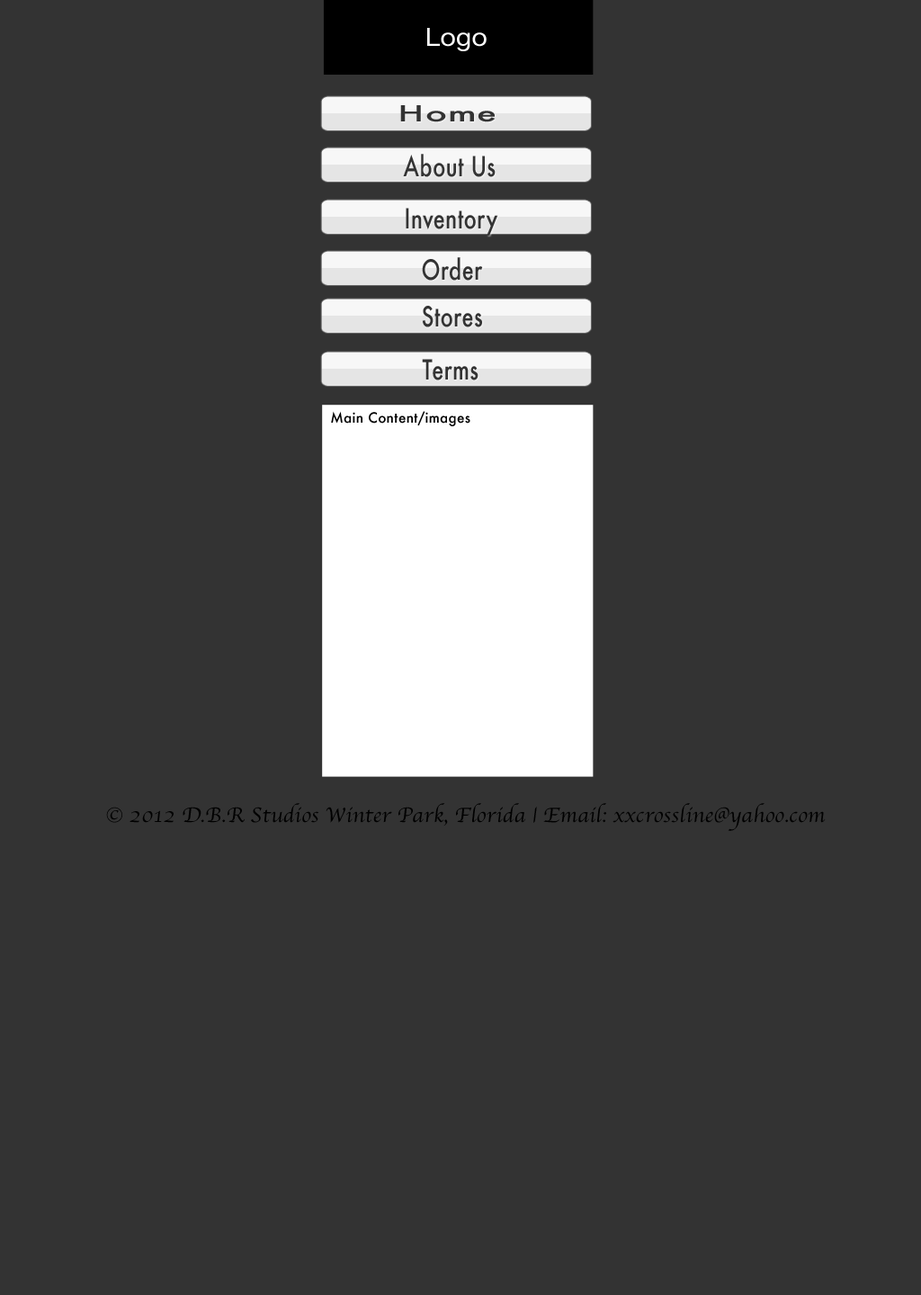
<style>
.page{position:relative;width:921px;height:1295px;background:#333333}
.page>*{position:absolute;margin:0}
.t1{font:25.2px "HelveticaNeue";letter-spacing:0.01em;color:#ffffff;scale:1.07 1}
.t2{font:21.6px "Futura-Medium";letter-spacing:0.02em;color:#333333;scale:1.67 1}
.t3{font:27px "Futura-Medium";letter-spacing:0.02em;color:#333333;scale:0.78 1}
.t4{font:13.6px "Futura-Medium";letter-spacing:0.02em;color:#000000}
.t5{font:21.6px "Apple-Chancery";letter-spacing:0.01em;color:#000000}
</style>
<div class="page">
<p class="t1" style="left:427px;top:28px;width:60px;height:23px">Logo</p>
<p class="t2" style="left:400px;top:105px;width:95px;height:17px">Home</p>
<p class="t3" style="left:403px;top:154px;width:92px;height:23px">About Us</p>
<p class="t3" style="left:406px;top:208px;width:92px;height:28px">Inventory</p>
<p class="t3" style="left:422px;top:257px;width:61px;height:24px">Order</p>
<p class="t3" style="left:422px;top:306px;width:60px;height:21px">Stores</p>
<p class="t3" style="left:422px;top:359px;width:56px;height:21px">Terms</p>
<p class="t4" style="left:331px;top:411px;width:139px;height:15px">Main Content/images</p>
<p class="t5" style="left:106px;top:803px;width:720px;height:28px">© 2012 D.B.R Studios Winter Park, Florida | Email: xxcrossline@yahoo.com</p>
</div>
